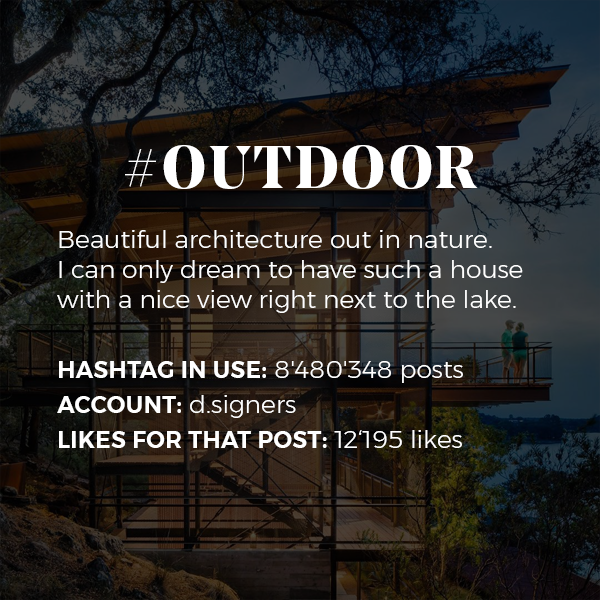
<style>
.page{position:relative;width:600px;height:600px}
.page>*{position:absolute;margin:0}
.t1{font:25px "Montserrat-Light";color:#ffffff}
.t2{font:60px "NoeDisplay-Bold";letter-spacing:0.06em;color:#ffffff;text-transform:uppercase}
.t3{font:23px/35px "Montserrat-SemiBold";letter-spacing:0.02em;color:#ffffff;text-transform:uppercase}
.t4{font:25px/35px "Montserrat-Light";color:#ffffff}
</style>
<div class="page">
<p class="t1" style="left:57px;top:145px;width:466px;height:303px;text-align:center"><span class="t2">#Outdoor<br></span><br>Beautiful architecture out in nature. <br>I can only dream to have such a house with a nice view right next to the lake. <br><br><span class="t3">Hashtag in Use:</span><span class="t4"> 8'480'348 posts<br></span><span class="t3">ACCOUNT:</span><span class="t4"> d.signers<br></span><span class="t3">Likes for that post:</span><span class="t4"> 12‘195 likes</span></p>
</div>
